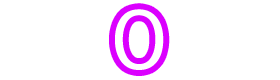
<style>
.page{position:relative;width:280px;height:80px;background:#ffffff}
.page>*{position:absolute;margin:0}
.t1{font:75px "Geneva";color:#ffffff}
</style>
<div class="page">
<p class="t1" style="left:115px;top:9px;width:49px;height:61px">O</p>
</div>
